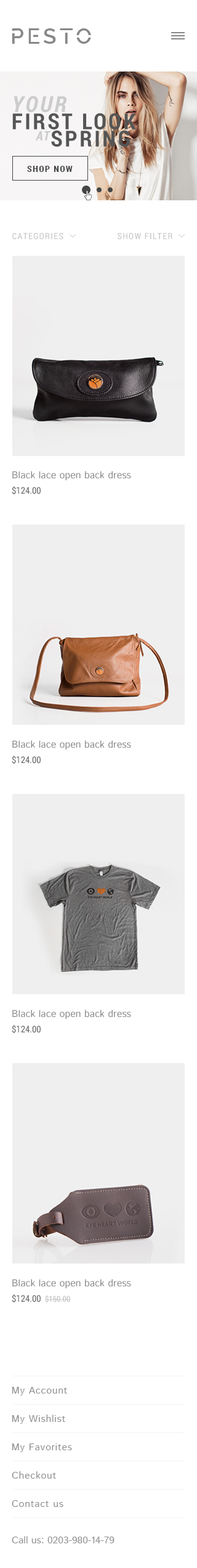
<style>
.page{position:relative;width:197px;height:1568px;background:#ffffff}
.page>*{position:absolute;margin:0}
.t1{font:21.6px "Raleway-SemiBold";letter-spacing:0.15em;color:#888888;text-transform:uppercase}
.t2{font:22.2px/17.3px "RobotoCondensed-Bold";letter-spacing:0.1em;color:#555555;text-transform:uppercase}
.t3{font:22.2px/17.3px "RobotoCondensed-BoldItalic";letter-spacing:0.1em;color:#cccccc;text-transform:uppercase}
.t4{font:12.9px "RobotoCondensed-BoldItalic";letter-spacing:0.1em;color:#cccccc;text-transform:uppercase}
.t5{font:8.6px "RobotoCondensed-Bold";letter-spacing:0.1em;color:#444645;text-transform:uppercase}
.t6{font:8.6px "RobotoCondensed-Regular";letter-spacing:0.1em;color:#c6c6c6;text-transform:uppercase}
.t7{font:9.9px "IstokWeb-Regular";color:#8d8c8c}
.t8{font:9.2px "RobotoCondensed-Regular";color:#686868}
.t9{font:8px "RobotoCondensed-Regular";color:#c1c1c1}
.t10{font:9.9px "IstokWeb-Regular";letter-spacing:0.04em;color:#929292}
.t11{font:9.9px "IstokWeb-Regular";color:#929292;text-transform:uppercase}
.t12{font:9.9px "IstokWeb-Regular";color:#929292}
</style>
<div class="page">
<p class="t1" style="left:12px;top:28px;width:79px;height:16px">Pesto</p>
<p class="t2" style="left:12px;top:96px;width:124px;height:51px"><span class="t3">your</span> <br>first look <br>      spring</p>
<p class="t4" style="left:35px;top:131px;width:16px;height:10px">at</p>
<p class="t5" style="left:27px;top:166px;width:46px;height:6px">shop now</p>
<p class="t6" style="left:12px;top:233px;width:51px;height:7px">CATEGORIES</p>
<p class="t6" style="left:118px;top:233px;width:55px;height:7px">Show filter</p>
<p class="t7" style="left:12px;top:471px;width:119px;height:10px">Black lace open back dress</p>
<p class="t8" style="left:12px;top:486px;width:29px;height:9px">$124.00</p>
<p class="t7" style="left:12px;top:740px;width:119px;height:10px">Black lace open back dress</p>
<p class="t8" style="left:12px;top:755px;width:29px;height:9px">$124.00</p>
<p class="t7" style="left:12px;top:1010px;width:119px;height:9px">Black lace open back dress</p>
<p class="t8" style="left:12px;top:1024px;width:29px;height:10px">$124.00</p>
<p class="t7" style="left:12px;top:1279px;width:119px;height:10px">Black lace open back dress</p>
<p class="t8" style="left:12px;top:1294px;width:29px;height:9px">$124.00</p>
<p class="t9" style="left:45px;top:1295px;width:26px;height:8px">$150.00</p>
<p class="t10" style="left:12px;top:1387px;width:55px;height:8px">My Account</p>
<p class="t10" style="left:12px;top:1415px;width:53px;height:9px">My Wishlist</p>
<p class="t10" style="left:12px;top:1443px;width:60px;height:9px">My Favorites</p>
<p class="t10" style="left:12px;top:1471px;width:44px;height:8px">Checkout</p>
<p class="t10" style="left:12px;top:1500px;width:51px;height:7px">Contact us</p>
<p class="t11" style="left:12px;top:1536px;width:103px;height:7px">C<span class="t12">all us:</span> 0203-980-14-79</p>
</div>
